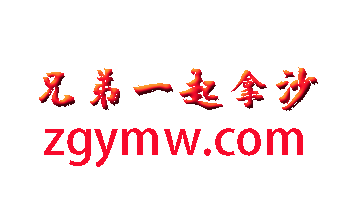
<style>
.page{position:relative;width:358px;height:200px;background:#ffffff}
.page>*{position:absolute;margin:0}
.t1{font:48px "24--Regular"}
.t2{font:48px "AdobeHeitiStd-Regular";color:#f80a2b}
</style>
<div class="page">
<p class="t1" style="left:39px;top:67px;width:279px;height:44px">兄弟一起拿沙</p>
<p class="t2" style="left:44px;top:128px;width:259px;height:39px">zgymw.com</p>
</div>
